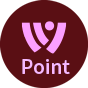
<style>
.page{position:relative;width:88px;height:88px;background:#5a0f14}
.page>*{position:absolute;margin:0}
.t1{font:19.2px "NotoSansKR-Medium";color:#f6b9ff}
</style>
<div class="page">
<p class="t1" style="left:22px;top:59px;width:48px;height:15px">Point</p>
</div>
